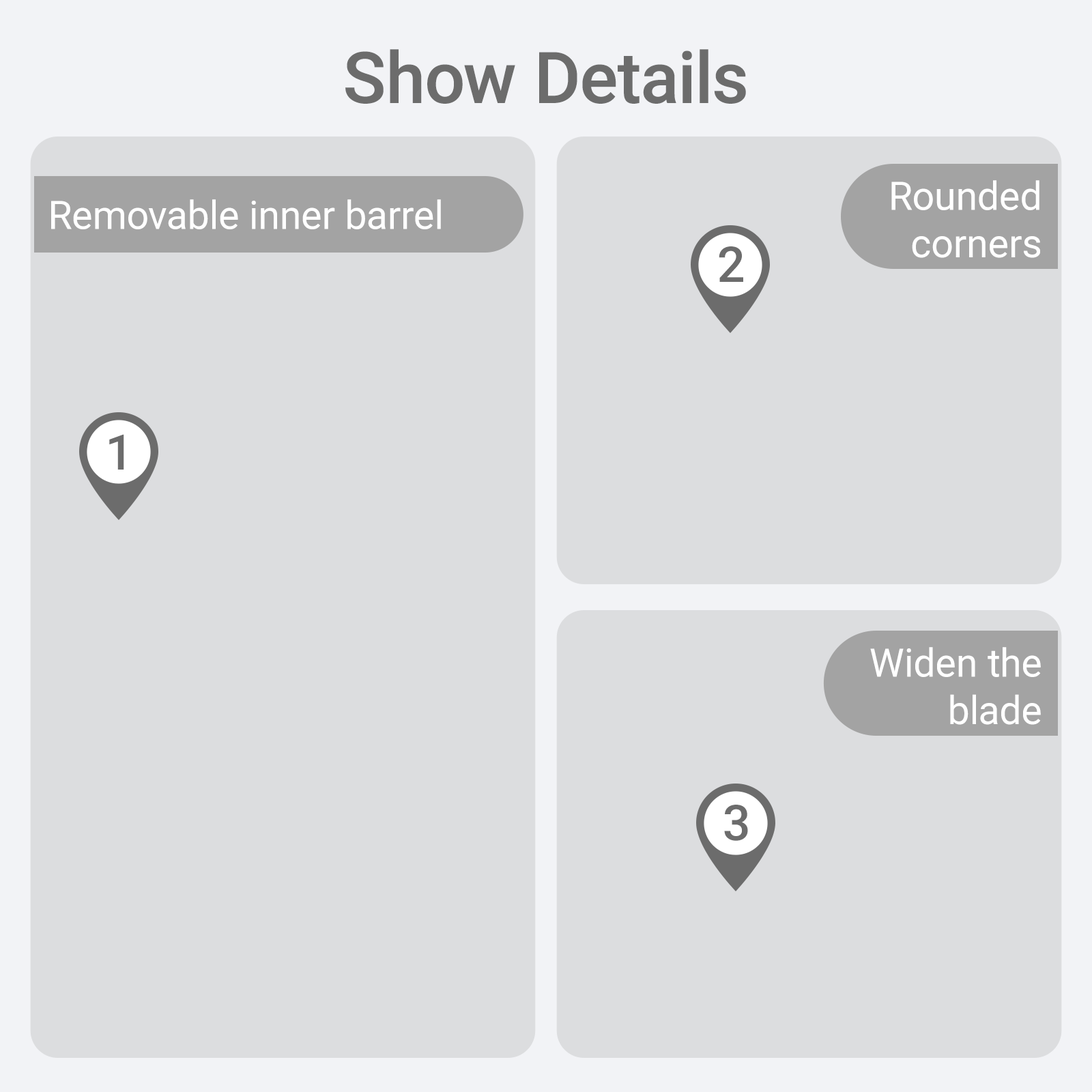
<style>
.page{position:relative;width:1092px;height:1092px;background:#dcdddf}
.page>*{position:absolute;margin:0}
.t1{font:71.3px "Roboto-Medium";color:#6c6c6c}
.t2{font:39.3px/39.3px "Roboto-Regular";color:#ffffff}
.t3{font:39.3px "Roboto-Regular";color:#ffffff}
.t4{font:49.1px "Roboto-Medium";color:#6c6c6c}
</style>
<div class="page">
<p class="t1" style="left:345px;top:49px;width:401px;height:55px">Show Details</p>
<p class="t2" style="left:891px;top:180px;width:149px;height:78px;text-align:right">Rounded<br> corners</p>
<p class="t3" style="left:51px;top:199px;width:390px;height:30px">Removable inner barrel</p>
<p class="t4" style="left:719px;top:246px;width:24px;height:36px">2</p>
<p class="t4" style="left:109px;top:434px;width:15px;height:36px">1</p>
<p class="t2" style="left:870px;top:647px;width:171px;height:78px;text-align:right">Widen the<br> blade</p>
<p class="t4" style="left:724px;top:805px;width:24px;height:36px">3</p>
</div>
